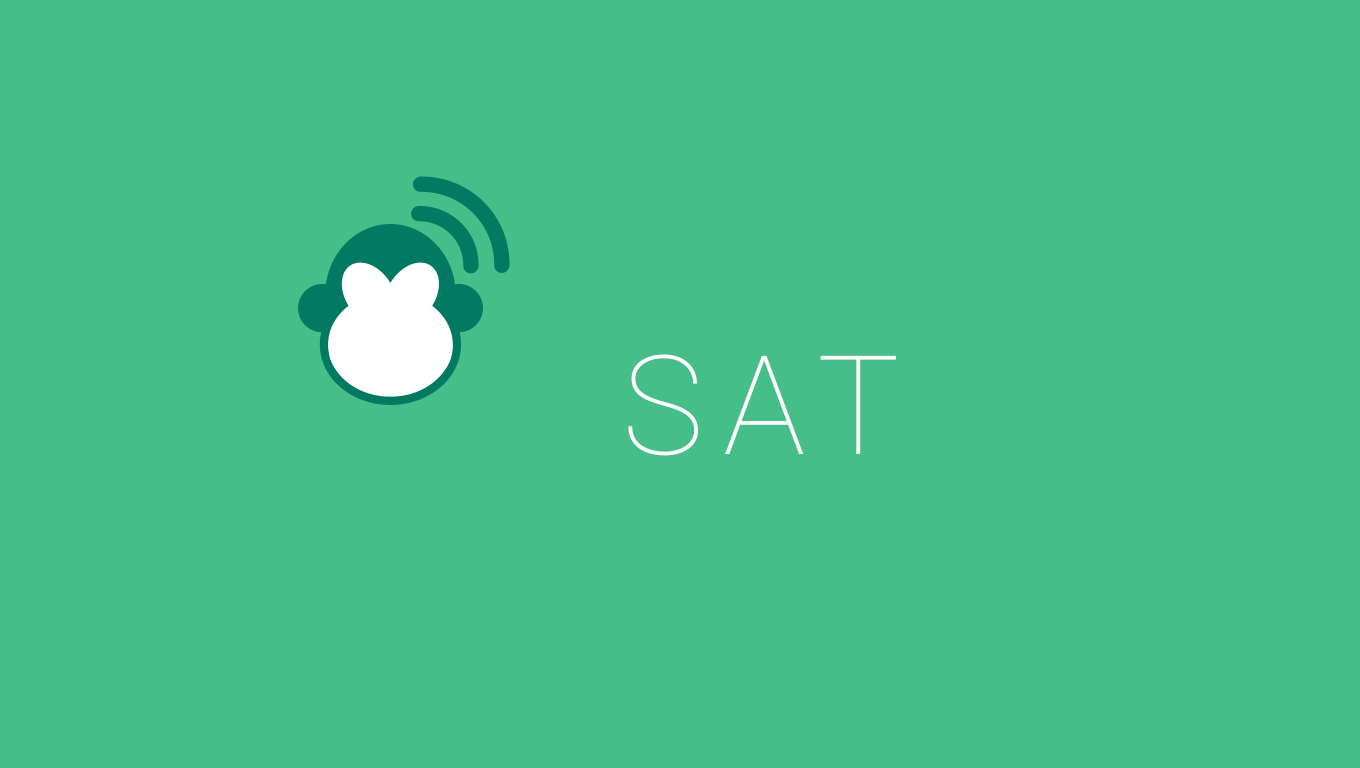
<style>
.page{position:relative;width:1360px;height:768px;background:#46be8a}
.page>*{position:absolute;margin:0}
.t1{font:138.5px "Roboto-Thin";letter-spacing:0.14em;color:#fffefe}
</style>
<div class="page">
<p class="t1" style="left:628px;top:354px;width:268px;height:102px">SAT</p>
</div>
